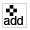
<style>
.page{position:relative;width:30px;height:30px;background:#ffffff}
.page>*{position:absolute;margin:0}
.t1{font:12px "Helvetica";color:#000000}
</style>
<div class="page">
<p class="t1" style="left:3px;top:16px;width:20px;height:9px">add</p>
</div>
